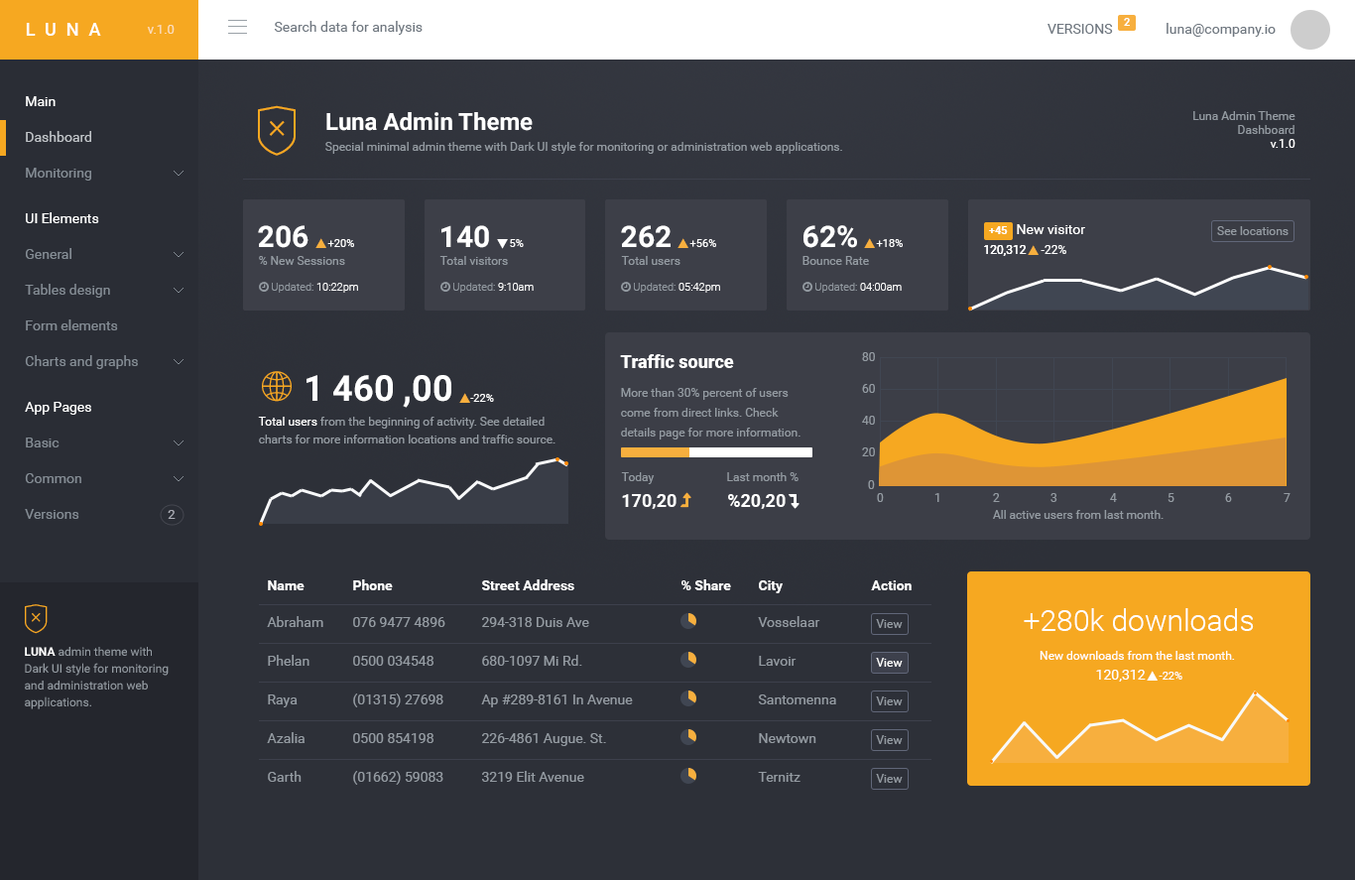
<style>
.page{position:relative;width:1355px;height:880px;background:#2d3038}
.page>*{position:absolute;margin:0}
.t1{font:10.9px "Roboto-Bold";color:#ffffff}
.t2{font:17.9px "Roboto-Medium";letter-spacing:0.55em;color:#ffffff}
.t3{font:12.9px "Roboto-Regular";color:#fbdfbc}
.t4{font:13.9px "Roboto-Regular";color:#6f7780}
.t5{font:13.9px "Roboto-Regular";color:#ffffff}
.t6{font:23.8px "Roboto-Bold";color:#ffffff}
.t7{font:11.9px/13.9px "Roboto-Regular";color:#949ba2}
.t8{font:11.9px/13.9px "Roboto-Regular";color:#ffffff}
.t9{font:13.9px "Roboto-Regular";color:#c0c4c8}
.t10{font:11.9px "Roboto-Regular";color:#949ba2}
.t11{font:13.9px "Roboto-Regular";color:#848c94}
.t12{font:29.8px "Roboto-Bold";color:#ffffff}
.t13{font:10.9px "Roboto-Black";color:#ffffff}
.t14{font:10.9px "Roboto-Regular";color:#ffffff}
.t15{font:11.9px "Roboto-Regular";color:#ffffff}
.t16{font:10.9px "Roboto-Light";color:#949ba2}
.t17{font:10.9px "Roboto-Light";color:#ffffff}
.t18{font:17.9px "Roboto-Black";color:#ffffff}
.t19{font:35.7px "Roboto-Bold";color:#ffffff}
.t20{font:11.9px/19.8px "Roboto-Regular";color:#949ba2}
.t21{font:11.9px/17.9px "Roboto-Regular";color:#949ba2}
.t22{font:11.9px/17.9px "Roboto-Regular";color:#ffffff}
.t23{font:17.9px "Roboto-Bold";color:#ffffff}
.t24{font:12.9px "Roboto-Regular";color:#aaacb5}
.t25{font:13.9px "Roboto-Bold";color:#ffffff}
.t26{font:13.9px "Roboto-Regular";color:#949ba2}
.t27{font:29.8px "Roboto-Light";color:#ffffff}
.t28{font:11.9px/16.9px "Roboto-Regular";color:#949ba2}
.t29{font:11.9px/16.9px "Roboto-Bold";color:#ffffff}
</style>
<div class="page">
<p class="t1" style="left:1124px;top:18px;width:6px;height:8px">2</p>
<p class="t2" style="left:26px;top:23px;width:75px;height:13px">LUNA</p>
<p class="t3" style="left:147px;top:25px;width:28px;height:9px">v.1.0</p>
<p class="t4" style="left:274px;top:21px;width:149px;height:14px">Search data for analysis</p>
<p class="t4" style="left:1048px;top:24px;width:65px;height:10px">VERSIONS</p>
<p class="t4" style="left:1167px;top:23px;width:109px;height:14px">luna@company.io</p>
<p class="t5" style="left:26px;top:96px;width:30px;height:10px">Main</p>
<p class="t6" style="left:326px;top:112px;width:207px;height:19px">Luna Admin Theme</p>
<p class="t7" style="left:1193px;top:111px;width:103px;height:37px;text-align:right">Luna Admin Theme<br>Dashboard<br><span class="t8">v.1.0</span></p>
<p class="t9" style="left:26px;top:131px;width:65px;height:11px">Dashboard</p>
<p class="t10" style="left:325px;top:142px;width:517px;height:12px">Special minimal admin theme with Dark UI style for monitoring or administration web applications.</p>
<p class="t11" style="left:26px;top:168px;width:65px;height:13px">Monitoring</p>
<p class="t5" style="left:26px;top:212px;width:73px;height:11px">UI Elements</p>
<p class="t12" style="left:258px;top:225px;width:51px;height:23px">206</p>
<p class="t12" style="left:441px;top:225px;width:48px;height:23px">140</p>
<p class="t12" style="left:621px;top:225px;width:50px;height:23px">262</p>
<p class="t12" style="left:804px;top:225px;width:53px;height:23px">62%</p>
<p class="t13" style="left:989px;top:226px;width:19px;height:8px">+45</p>
<p class="t5" style="left:1017px;top:224px;width:68px;height:10px">New visitor</p>
<p class="t10" style="left:1217px;top:226px;width:72px;height:9px">See locations</p>
<p class="t14" style="left:327px;top:239px;width:27px;height:8px">+20%</p>
<p class="t14" style="left:510px;top:239px;width:14px;height:8px">5%</p>
<p class="t14" style="left:689px;top:239px;width:27px;height:8px">+56%</p>
<p class="t14" style="left:876px;top:239px;width:27px;height:8px">+18%</p>
<p class="t15" style="left:984px;top:245px;width:43px;height:11px">120,312</p>
<p class="t15" style="left:984px;top:245px;width:43px;height:11px">120,312</p>
<p class="t15" style="left:1041px;top:245px;width:25px;height:9px">-22%</p>
<p class="t11" style="left:26px;top:248px;width:45px;height:11px">General</p>
<p class="t10" style="left:259px;top:256px;width:86px;height:9px">% New Sessions</p>
<p class="t10" style="left:439px;top:256px;width:69px;height:9px">Total visitors</p>
<p class="t10" style="left:621px;top:256px;width:60px;height:9px">Total users</p>
<p class="t10" style="left:803px;top:256px;width:66px;height:9px">Bounce Rate</p>
<p class="t11" style="left:25px;top:284px;width:85px;height:14px">Tables design</p>
<p class="t16" style="left:272px;top:283px;width:86px;height:10px">Updated: <span class="t17">10:22pm</span></p>
<p class="t16" style="left:453px;top:283px;width:81px;height:10px">Updated: <span class="t17">9:10am</span></p>
<p class="t16" style="left:634px;top:283px;width:86px;height:10px">Updated: <span class="t17">05:42pm</span></p>
<p class="t16" style="left:815px;top:283px;width:87px;height:10px">Updated: <span class="t17">04:00am</span></p>
<p class="t11" style="left:26px;top:319px;width:92px;height:11px">Form elements</p>
<p class="t10" style="left:862px;top:352px;width:13px;height:9px">80</p>
<p class="t11" style="left:25px;top:355px;width:113px;height:14px">Charts and graphs</p>
<p class="t18" style="left:620px;top:354px;width:114px;height:14px">Traffic source</p>
<p class="t19" style="left:307px;top:375px;width:144px;height:33px">1 460 ,00</p>
<p class="t20" style="left:621px;top:388px;width:180px;height:51px">More than 30% percent of users come from direct links. Check details page for more information.</p>
<p class="t10" style="left:862px;top:384px;width:13px;height:9px">60</p>
<p class="t5" style="left:25px;top:402px;width:66px;height:13px">App Pages</p>
<p class="t14" style="left:470px;top:394px;width:24px;height:8px">-22%</p>
<p class="t21" style="left:258px;top:417px;width:298px;height:26px"><span class="t22">Total users</span> from the beginning of activity. See detailed charts for more information locations and traffic source.</p>
<p class="t10" style="left:862px;top:416px;width:13px;height:9px">40</p>
<p class="t11" style="left:26px;top:437px;width:34px;height:10px">Basic</p>
<p class="t10" style="left:862px;top:447px;width:13px;height:9px">20</p>
<p class="t11" style="left:25px;top:473px;width:56px;height:10px">Common</p>
<p class="t10" style="left:621px;top:472px;width:34px;height:12px">Today</p>
<p class="t10" style="left:727px;top:472px;width:72px;height:9px">Last month %</p>
<p class="t10" style="left:868px;top:480px;width:7px;height:9px">0</p>
<p class="t23" style="left:622px;top:494px;width:55px;height:15px">170,20</p>
<p class="t23" style="left:728px;top:494px;width:58px;height:15px">%20,20</p>
<p class="t10" style="left:877px;top:493px;width:7px;height:9px">0</p>
<p class="t10" style="left:935px;top:493px;width:4px;height:9px">1</p>
<p class="t10" style="left:993px;top:493px;width:7px;height:9px">2</p>
<p class="t10" style="left:1051px;top:493px;width:7px;height:9px">3</p>
<p class="t10" style="left:1110px;top:493px;width:7px;height:9px">4</p>
<p class="t10" style="left:1168px;top:493px;width:7px;height:9px">5</p>
<p class="t10" style="left:1225px;top:493px;width:7px;height:9px">6</p>
<p class="t10" style="left:1284px;top:493px;width:7px;height:9px">7</p>
<p class="t11" style="left:25px;top:509px;width:54px;height:10px">Versions</p>
<p class="t24" style="left:168px;top:510px;width:8px;height:9px">2</p>
<p class="t10" style="left:993px;top:510px;width:171px;height:9px">All active users from last month.</p>
<p class="t25" style="left:268px;top:580px;width:37px;height:10px">Name</p>
<p class="t25" style="left:353px;top:579px;width:40px;height:11px">Phone</p>
<p class="t25" style="left:482px;top:579px;width:92px;height:11px">Street Address</p>
<p class="t25" style="left:682px;top:579px;width:49px;height:11px">% Share</p>
<p class="t25" style="left:759px;top:580px;width:24px;height:13px">City</p>
<p class="t25" style="left:871px;top:580px;width:41px;height:10px">Action</p>
<p class="t26" style="left:267px;top:616px;width:56px;height:11px">Abraham</p>
<p class="t26" style="left:353px;top:617px;width:92px;height:10px">076 9477 4896</p>
<p class="t26" style="left:482px;top:617px;width:107px;height:10px">294-318 Duis Ave</p>
<p class="t26" style="left:758px;top:616px;width:62px;height:11px">Vosselaar</p>
<p class="t27" style="left:1024px;top:608px;width:230px;height:23px">+280k downloads</p>
<p class="t10" style="left:876px;top:619px;width:27px;height:9px">View</p>
<p class="t28" style="left:25px;top:647px;width:144px;height:62px"><span class="t29">LUNA </span>admin theme with Dark UI style for monitoring and administration web applications.</p>
<p class="t15" style="left:1040px;top:651px;width:195px;height:9px">New downloads from the last month.</p>
<p class="t26" style="left:268px;top:655px;width:42px;height:11px">Phelan</p>
<p class="t26" style="left:353px;top:656px;width:81px;height:10px">0500 034548</p>
<p class="t26" style="left:482px;top:655px;width:100px;height:11px">680-1097 Mi Rd.</p>
<p class="t26" style="left:759px;top:656px;width:38px;height:10px">Lavoir</p>
<p class="t15" style="left:876px;top:658px;width:27px;height:9px">View</p>
<p class="t5" style="left:1096px;top:670px;width:50px;height:12px">120,312</p>
<p class="t14" style="left:1159px;top:672px;width:24px;height:8px">-22%</p>
<p class="t26" style="left:268px;top:694px;width:30px;height:13px">Raya</p>
<p class="t26" style="left:353px;top:693px;width:90px;height:14px">(01315) 27698</p>
<p class="t26" style="left:481px;top:694px;width:152px;height:13px">Ap #289-8161 In Avenue</p>
<p class="t26" style="left:758px;top:694px;width:78px;height:10px">Santomenna</p>
<p class="t10" style="left:876px;top:696px;width:27px;height:9px">View</p>
<p class="t26" style="left:267px;top:732px;width:38px;height:11px">Azalia</p>
<p class="t26" style="left:353px;top:733px;width:81px;height:10px">0500 854198</p>
<p class="t26" style="left:482px;top:733px;width:124px;height:13px">226-4861 Augue. St.</p>
<p class="t26" style="left:759px;top:733px;width:57px;height:10px">Newtown</p>
<p class="t10" style="left:876px;top:735px;width:27px;height:9px">View</p>
<p class="t26" style="left:268px;top:771px;width:34px;height:11px">Garth</p>
<p class="t26" style="left:353px;top:771px;width:90px;height:14px">(01662) 59083</p>
<p class="t26" style="left:482px;top:771px;width:102px;height:11px">3219 Elit Avenue</p>
<p class="t26" style="left:758px;top:772px;width:43px;height:10px">Ternitz</p>
<p class="t10" style="left:876px;top:774px;width:27px;height:9px">View</p>
</div>
